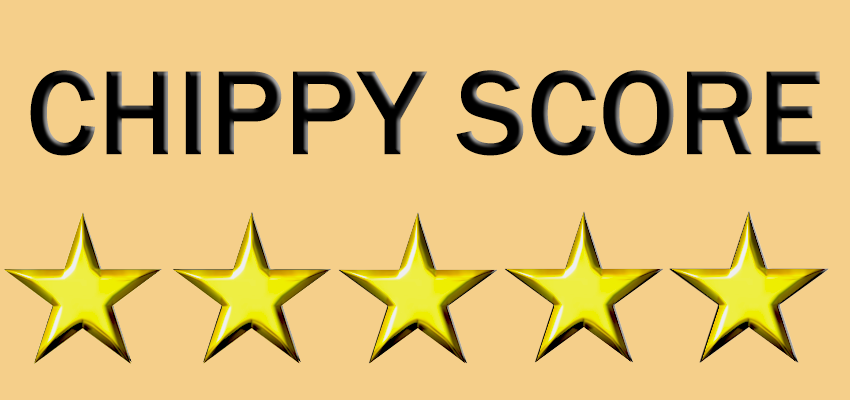
<style>
.page{position:relative;width:850px;height:400px;background:#f5cf8a}
.page>*{position:absolute;margin:0}
.t1{font:123.6px "FranklinGothic-Medium";color:#000000}
</style>
<div class="page">
<p class="t1" style="left:30px;top:70px;width:791px;height:86px">CHIPPY SCORE</p>
</div>
